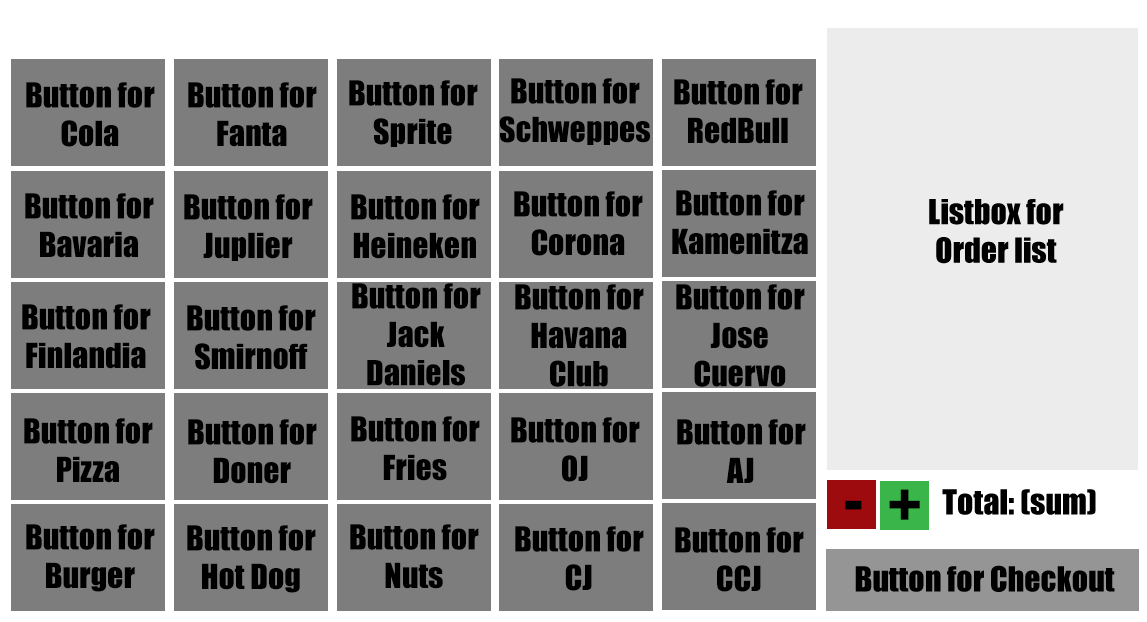
<style>
.page{position:relative;width:1147px;height:622px;background:#7d7d7d}
.page>*{position:absolute;margin:0}
.t1{font:32px "Impact";color:#000000}
</style>
<div class="page">
<p class="t1" style="left:499px;top:78px;width:151px;height:67px;text-align:center">Button for<br>Schweppes</p>
<p class="t1" style="left:26px;top:82px;width:129px;height:65px;text-align:center">Button for<br>Cola</p>
<p class="t1" style="left:188px;top:82px;width:129px;height:65px;text-align:center">Button for<br>Fanta</p>
<p class="t1" style="left:349px;top:80px;width:129px;height:67px;text-align:center">Button for<br>Sprite</p>
<p class="t1" style="left:674px;top:79px;width:129px;height:65px;text-align:center">Button for<br>RedBull</p>
<p class="t1" style="left:25px;top:193px;width:129px;height:65px;text-align:center">Button for<br>Bavaria</p>
<p class="t1" style="left:184px;top:194px;width:129px;height:67px;text-align:center">Button for<br>Juplier</p>
<p class="t1" style="left:351px;top:194px;width:129px;height:65px;text-align:center">Button for<br>Heineken</p>
<p class="t1" style="left:514px;top:191px;width:129px;height:65px;text-align:center">Button for<br>Corona</p>
<p class="t1" style="left:672px;top:190px;width:136px;height:65px;text-align:center">Button for<br>Kamenitza</p>
<p class="t1" style="left:352px;top:283px;width:129px;height:103px;text-align:center">Button for<br>Jack<br>Daniels</p>
<p class="t1" style="left:515px;top:284px;width:129px;height:103px;text-align:center">Button for<br>Havana<br>Club</p>
<p class="t1" style="left:676px;top:284px;width:129px;height:103px;text-align:center">Button for<br>Jose<br>Cuervo</p>
<p class="t1" style="left:22px;top:304px;width:129px;height:65px;text-align:center">Button for<br>Finlandia</p>
<p class="t1" style="left:187px;top:305px;width:129px;height:65px;text-align:center">Button for<br>Smirnoff</p>
<p class="t1" style="left:24px;top:418px;width:129px;height:65px;text-align:center">Button for<br>Pizza</p>
<p class="t1" style="left:188px;top:419px;width:129px;height:65px;text-align:center">Button for<br>Doner</p>
<p class="t1" style="left:351px;top:416px;width:129px;height:65px;text-align:center">Button for<br>Fries</p>
<p class="t1" style="left:511px;top:417px;width:129px;height:65px;text-align:center">Button for<br>OJ</p>
<p class="t1" style="left:677px;top:419px;width:129px;height:64px;text-align:center">Button for<br>AJ</p>
<p class="t1" style="left:26px;top:524px;width:129px;height:68px;text-align:center">Button for<br>Burger</p>
<p class="t1" style="left:187px;top:525px;width:129px;height:68px;text-align:center">Button for<br>Hot Dog</p>
<p class="t1" style="left:350px;top:524px;width:129px;height:65px;text-align:center">Button for<br>Nuts</p>
<p class="t1" style="left:515px;top:526px;width:129px;height:65px;text-align:center">Button for<br>CJ</p>
<p class="t1" style="left:675px;top:527px;width:129px;height:65px;text-align:center">Button for<br>CCJ</p>
</div>
